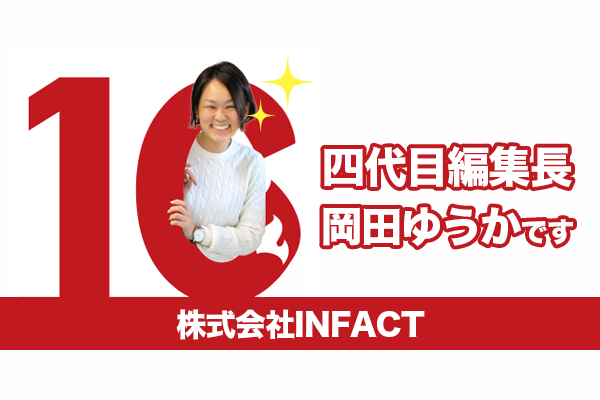
<style>
.page{position:relative;width:600px;height:400px;background:#fefefe}
.page>*{position:absolute;margin:0}
.t1{font:42.7px "HiraKakuStdN-W8";letter-spacing:-0.03em;color:#ffffff}
.t2{font:41.3px "HiraKakuStdN-W8";letter-spacing:-0.03em;color:#ffffff}
.t3{font:27.3px "HiraKakuStdN-W8";letter-spacing:-0.03em;color:#ffffff}
.t4{font:30.8px "HiraKakuStdN-W8";letter-spacing:-0.03em;color:#ffffff}
</style>
<div class="page">
<p class="t1" style="left:324px;top:146px;width:248px;height:42px">四代目編集長</p>
<p class="t2" style="left:323px;top:207px;width:250px;height:40px">岡田ゆうか<span class="t3">です</span></p>
<p class="t4" style="left:176px;top:309px;width:249px;height:31px">株式会社INFACT</p>
</div>
